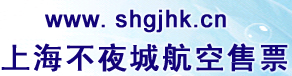
<style>
.page{position:relative;width:292px;height:76px}
.page>*{position:absolute;margin:0}
.t1{font:24px "ArialMT";letter-spacing:0.025em;color:#120379;font-weight:bold}
.t2{font:30px "SimHei";letter-spacing:0.05em;color:#120379;font-weight:bold}
</style>
<div class="page">
<p class="t1" style="left:45px;top:9px;width:181px;height:24px">www. shgjhk.cn</p>
<p class="t2" style="left:1px;top:43px;width:287px;height:29px">上海不夜城航空售票</p>
</div>
